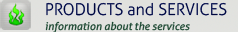
<style>
.page{position:relative;width:238px;height:32px}
.page>*{position:absolute;margin:0}
.t1{font:16.1px "Aller-Light";color:#02113c}
.t2{font:10.8px "Aller-Italic";color:#224332}
</style>
<div class="page">
<p class="t1" style="left:46px;top:2px;width:181px;height:14px">PRODUCTS and SERVICES</p>
<p class="t2" style="left:45px;top:21px;width:145px;height:12px">information about the services</p>
</div>
